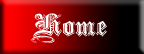
<style>
.page{position:relative;width:144px;height:54px}
.page>*{position:absolute;margin:0}
.t1{font:24px "EmbossedBlackWide-Normal";color:#ffffff}
</style>
<div class="page">
<p class="t1" style="left:31px;top:13px;width:76px;height:31px">Home</p>
</div>
